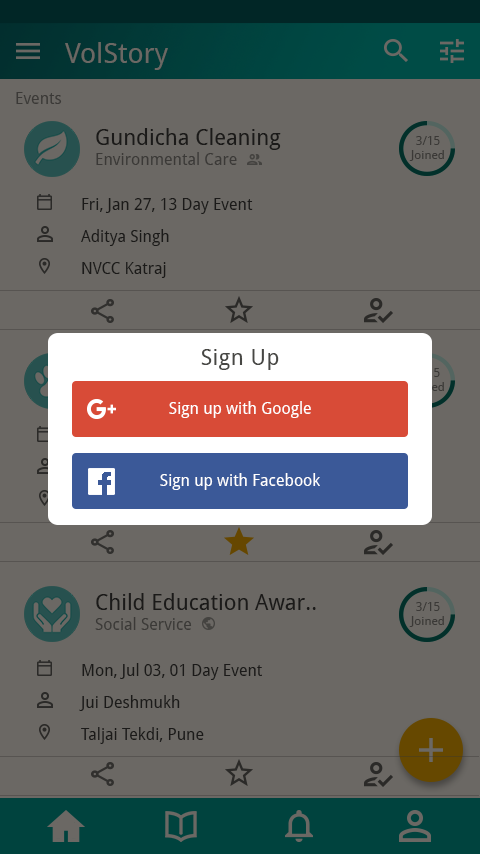
<style>
.page{position:relative;width:480px;height:854px;background:#6b6864}
.page>*{position:absolute;margin:0}
.t1{font:28px "DroidSans";color:#6b6864}
.t2{font:16px "DroidSans";color:#3b3937}
.t3{font:22px "DroidSans";color:#1b1a19}
.t4{font:12px "DroidSans";color:#3b3937}
.t5{font:16px "DroidSans";color:#1b1a19}
.t6{font:22px "DroidSans";letter-spacing:0.025em;color:#474744}
.t7{font:16px "DroidSans";color:#ffffff}
</style>
<div class="page">
<p class="t1" style="left:65px;top:42px;width:103px;height:28px">VolStory</p>
<p class="t2" style="left:16px;top:92px;width:46px;height:12px">Events</p>
<p class="t3" style="left:96px;top:128px;width:185px;height:22px">Gundicha Cleaning</p>
<p class="t4" style="left:409px;top:136px;width:35px;height:25px;text-align:center">3/15<br>Joined</p>
<p class="t2" style="left:96px;top:152px;width:141px;height:13px">Environmental Care</p>
<p class="t5" style="left:82px;top:198px;width:171px;height:16px">Fri, Jan 27, 13 Day Event</p>
<p class="t5" style="left:81px;top:229px;width:88px;height:17px">Aditya Singh</p>
<p class="t5" style="left:82px;top:262px;width:84px;height:16px">NVCC Katraj</p>
<p class="t6" style="left:201px;top:349px;width:78px;height:21px">Sign Up</p>
<p class="t7" style="left:169px;top:401px;width:142px;height:17px">Sign up with Google</p>
<p class="t7" style="left:160px;top:473px;width:160px;height:17px">Sign up with Facebook</p>
<p class="t3" style="left:96px;top:593px;width:220px;height:17px">Child Education Awar..</p>
<p class="t4" style="left:409px;top:602px;width:35px;height:25px;text-align:center">3/15<br>Joined</p>
<p class="t2" style="left:95px;top:617px;width:97px;height:13px">Social Service</p>
<p class="t5" style="left:82px;top:663px;width:180px;height:17px">Mon, Jul 03, 01 Day Event</p>
<p class="t5" style="left:79px;top:695px;width:101px;height:16px">Jui Deshmukh</p>
<p class="t5" style="left:81px;top:727px;width:123px;height:17px">Taljai Tekdi, Pune</p>
</div>
